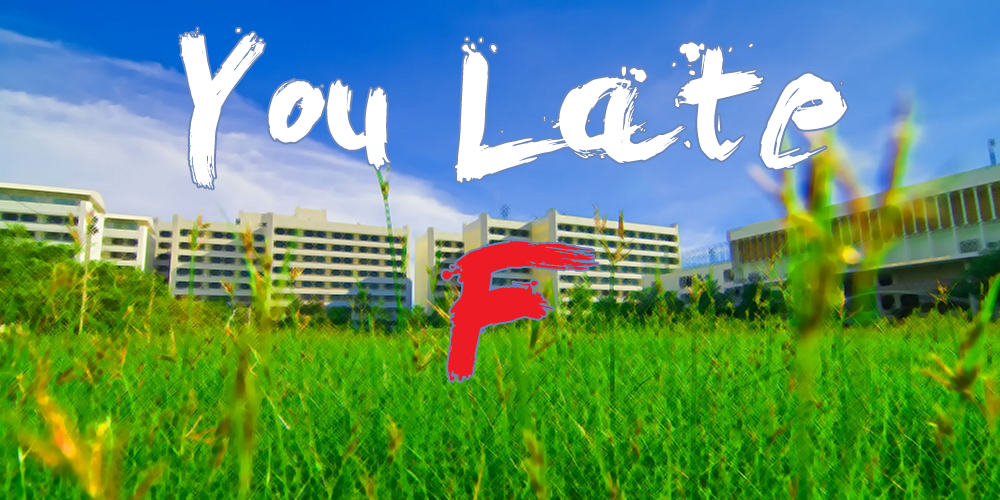
<style>
.page{position:relative;width:1000px;height:500px}
.page>*{position:absolute;margin:0}
.t1{font:165.6px "LeviBrush";color:#ffffff}
.t2{font:165.6px "LeviBrush";color:#ed1c24}
</style>
<div class="page">
<p class="t1" style="left:180px;top:28px;width:667px;height:354px;text-align:center">You Late<br><span class="t2">F</span></p>
</div>
